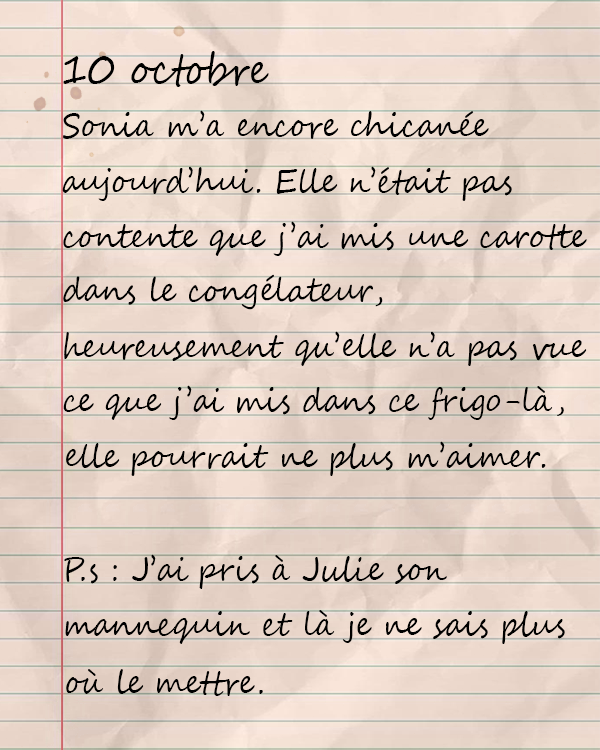
<style>
.page{position:relative;width:600px;height:750px}
.page>*{position:absolute;margin:0}
.t1{font:41.8px "SegoeScript";color:#000000;scale:0.9 1}
.t2{font:33.3px "SegoeScript";color:#000000;scale:0.9 1}
</style>
<div class="page">
<p class="t1" style="left:63px;top:51px;width:206px;height:36px">10 octobre</p>
<p class="t2" style="left:63px;top:110px;width:426px;height:29px">Sonia m’a encore chicanée</p>
<p class="t2" style="left:62px;top:166px;width:450px;height:35px">aujourd’hui. Elle n’était pas</p>
<p class="t2" style="left:63px;top:221px;width:524px;height:35px">contente que j’ai mis une carotte</p>
<p class="t2" style="left:63px;top:274px;width:320px;height:36px">dans le congélateur,</p>
<p class="t2" style="left:64px;top:331px;width:523px;height:35px">heureusement qu’elle n’a pas vue</p>
<p class="t2" style="left:63px;top:385px;width:501px;height:35px">ce que j’ai mis dans ce frigo-là,</p>
<p class="t2" style="left:66px;top:441px;width:480px;height:35px">elle pourrait ne plus m’aimer.</p>
<p class="t2" style="left:64px;top:554px;width:383px;height:35px">P.s : J’ai pris à Julie son</p>
<p class="t2" style="left:65px;top:610px;width:500px;height:34px">mannequin et là je ne sais plus</p>
<p class="t2" style="left:66px;top:669px;width:197px;height:27px">où le mettre.</p>
</div>
